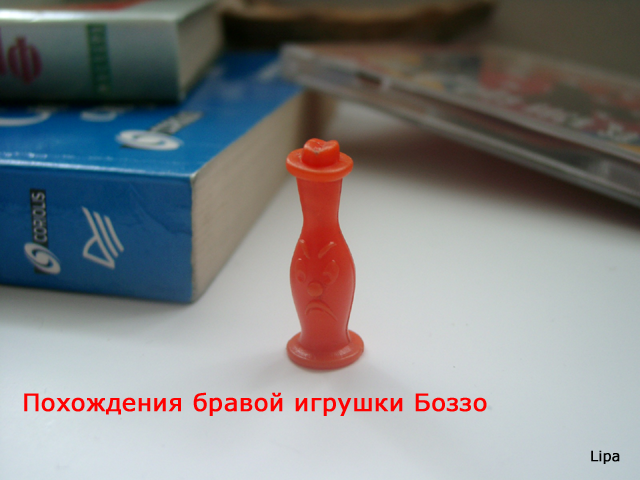
<style>
.page{position:relative;width:640px;height:480px}
.page>*{position:absolute;margin:0}
.t1{font:24px "Verdana";color:#ff0000;font-weight:bold}
.t2{font:14px "Verdana";color:#000000;font-weight:bold}
</style>
<div class="page">
<p class="t1" style="left:24px;top:392px;width:463px;height:24px">Похождения бравой игрушки Боззо</p>
<p class="t2" style="left:591px;top:450px;width:29px;height:14px">Lipa</p>
</div>
